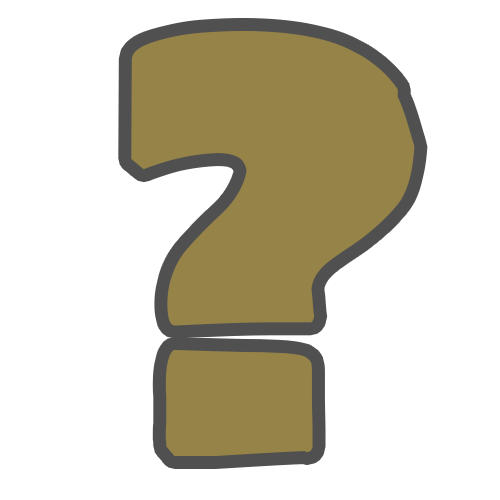
<style>
.page{position:relative;width:500px;height:500px;background:#ffffff}
.page>*{position:absolute;margin:0}
.t1{font:552.1px "BowlbyOneSC-Regular";color:#958348}
</style>
<div class="page">
<p class="t1" style="left:131px;top:31px;width:284px;height:425px">?</p>
</div>
